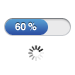
<style>
.page{position:relative;width:75px;height:75px;background:#ffffff}
.page>*{position:absolute;margin:0}
.t1{font:10px "Helvetica-Bold";color:#ffffff}
.t2{font:10px "Helvetica-Bold";letter-spacing:0.2em;color:#ffffff}
</style>
<div class="page">
<p class="t1" style="left:15px;top:22px;width:22px;height:9px">6<span class="t2">0</span>%</p>
</div>
